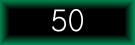
<style>
.page{position:relative;width:135px;height:45px;background:#000000}
.page>*{position:absolute;margin:0}
.t1{font:30px "Gulim";color:#ffffff}
.t2{font:30px "Gulim";color:#000000}
</style>
<div class="page">
<p class="t1" style="left:52px;top:9px;width:31px;height:23px"><span class="t2"><br></span>50</p>
</div>
